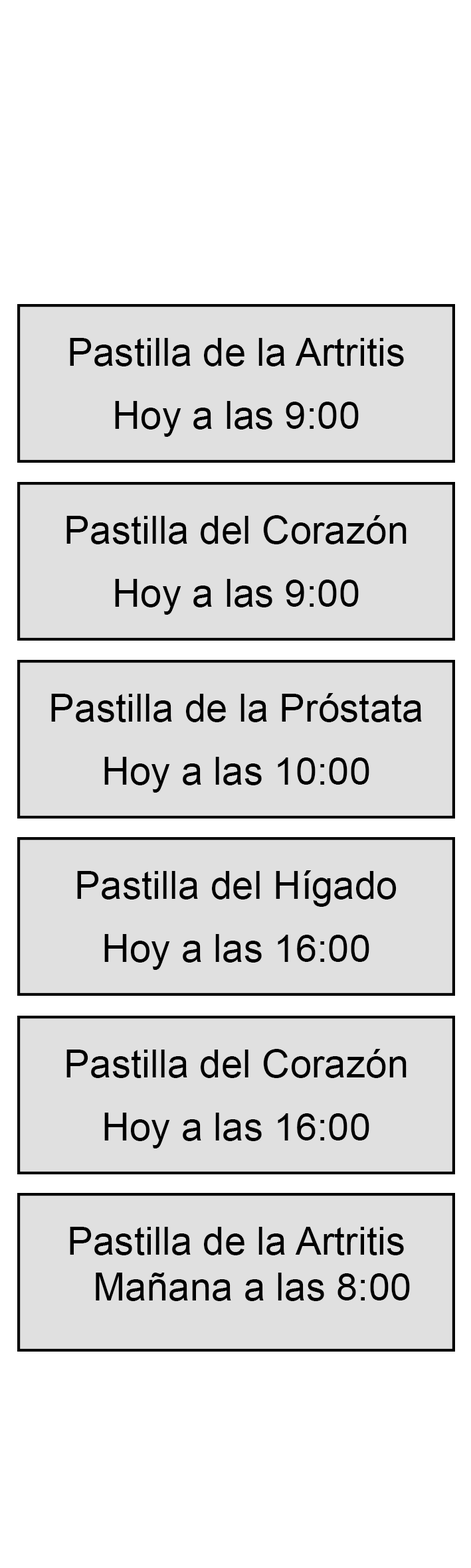
<style>
.page{position:relative;width:471px;height:1568px;background:#ffffff}
.page>*{position:absolute;margin:0}
.t1{font:38.7px "ArialMT";color:#000000}
</style>
<div class="page">
<p class="t1" style="left:70px;top:338px;width:334px;height:28px">Pastilla de la Artritis</p>
<p class="t1" style="left:115px;top:401px;width:243px;height:36px">Hoy a las 9:00</p>
<p class="t1" style="left:66px;top:515px;width:340px;height:29px">Pastilla del Corazón</p>
<p class="t1" style="left:115px;top:579px;width:243px;height:36px">Hoy a las 9:00</p>
<p class="t1" style="left:51px;top:693px;width:371px;height:29px">Pastilla de la Próstata</p>
<p class="t1" style="left:104px;top:757px;width:265px;height:36px">Hoy a las 10:00</p>
<p class="t1" style="left:77px;top:870px;width:319px;height:37px">Pastilla del Hígado</p>
<p class="t1" style="left:104px;top:934px;width:265px;height:36px">Hoy a las 16:00</p>
<p class="t1" style="left:66px;top:1049px;width:340px;height:29px">Pastilla del Corazón</p>
<p class="t1" style="left:104px;top:1113px;width:265px;height:35px">Hoy a las 16:00</p>
<p class="t1" style="left:70px;top:1227px;width:334px;height:28px">Pastilla de la Artritis</p>
<p class="t1" style="left:96px;top:1273px;width:314px;height:28px">Mañana a las 8:00</p>
</div>
